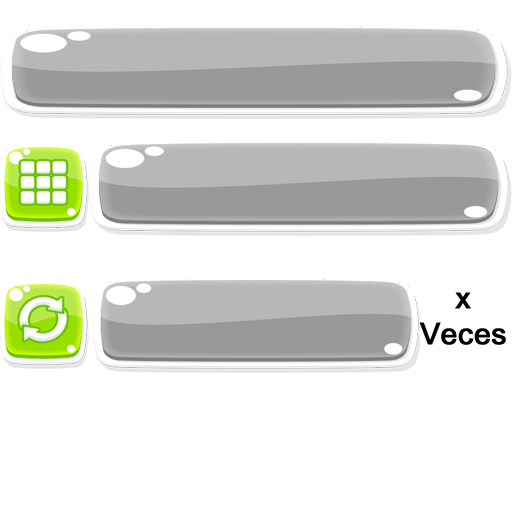
<style>
.page{position:relative;width:512px;height:512px;background:#ffffff}
.page>*{position:absolute;margin:0}
.t1{font:30px "ArialUnicodeMS";color:#000000;font-weight:bold}
</style>
<div class="page">
<p class="t1" style="left:419px;top:292px;width:87px;height:53px;text-align:center">x<br>Veces</p>
</div>
